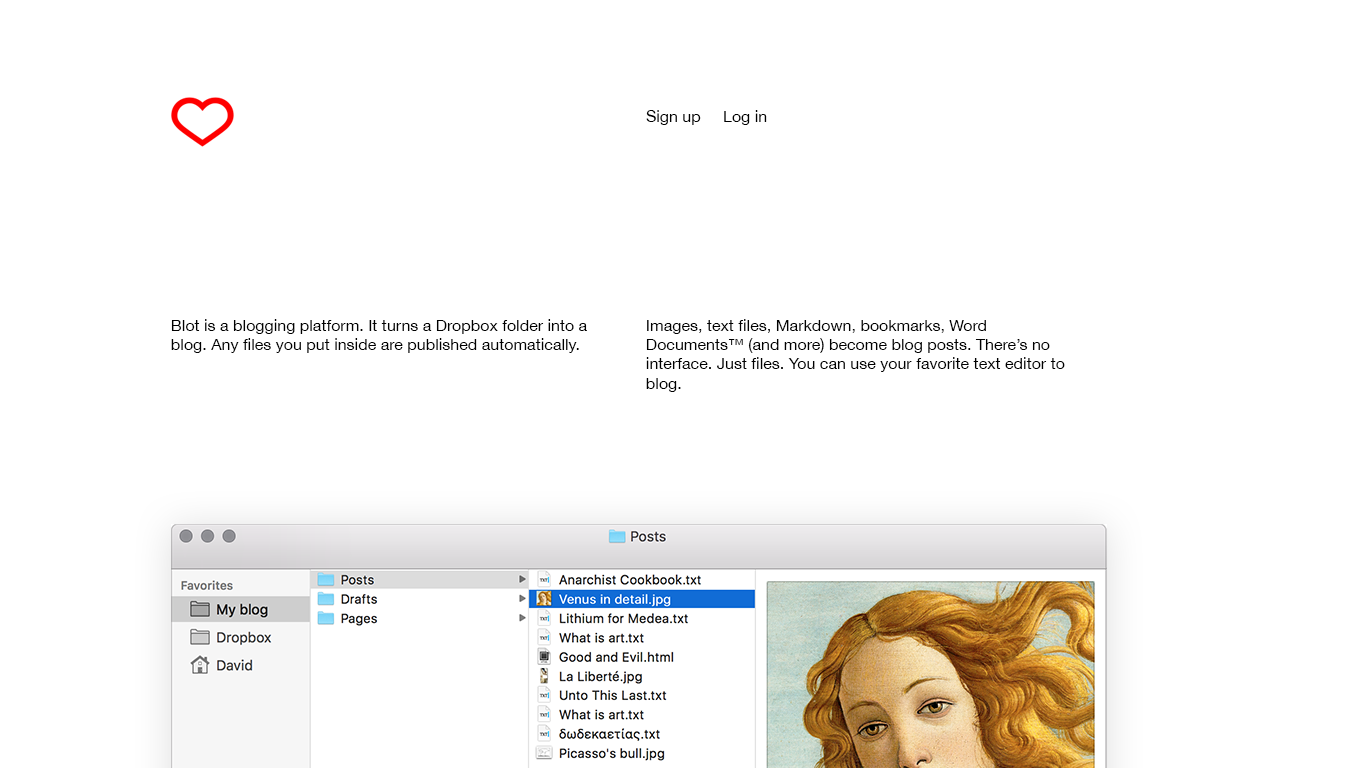
<style>
.page{position:relative;width:1366px;height:768px;background:#ffffff}
.page>*{position:absolute;margin:0}
.t1{font:16px "HelveticaNeue";color:#000000}
</style>
<div class="page">
<p class="t1" style="left:646px;top:110px;width:121px;height:15px">Sign up     Log in</p>
<p class="t1" style="left:171px;top:319px;width:416px;height:34px">Blot is a blogging platform. It turns a Dropbox folder into a blog. Any files you put inside are published automatically.</p>
<p class="t1" style="left:646px;top:319px;width:419px;height:73px">Images, text files, Markdown, bookmarks, Word Documents™ (and more) become blog posts. There’s no interface. Just files. You can use your favorite text editor to blog.</p>
</div>
